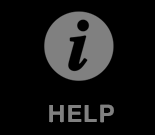
<style>
.page{position:relative;width:155px;height:135px;background:#000000}
.page>*{position:absolute;margin:0}
.t1{font:24px "AlteHaasGrotesk_Bold";letter-spacing:0.05em;color:#808080}
</style>
<div class="page">
<p class="t1" style="left:49px;top:104px;width:65px;height:19px">HELP</p>
</div>
